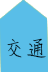
<style>
.page{position:relative;width:48px;height:72px;background:#59bee8}
.page>*{position:absolute;margin:0}
.t1{font:25.6px "DFYa-W3-WIN-BF";color:#000000;scale:0.86 1}
</style>
<div class="page">
<p class="t1" style="left:7px;top:38px;width:39px;height:20px">交通</p>
</div>
